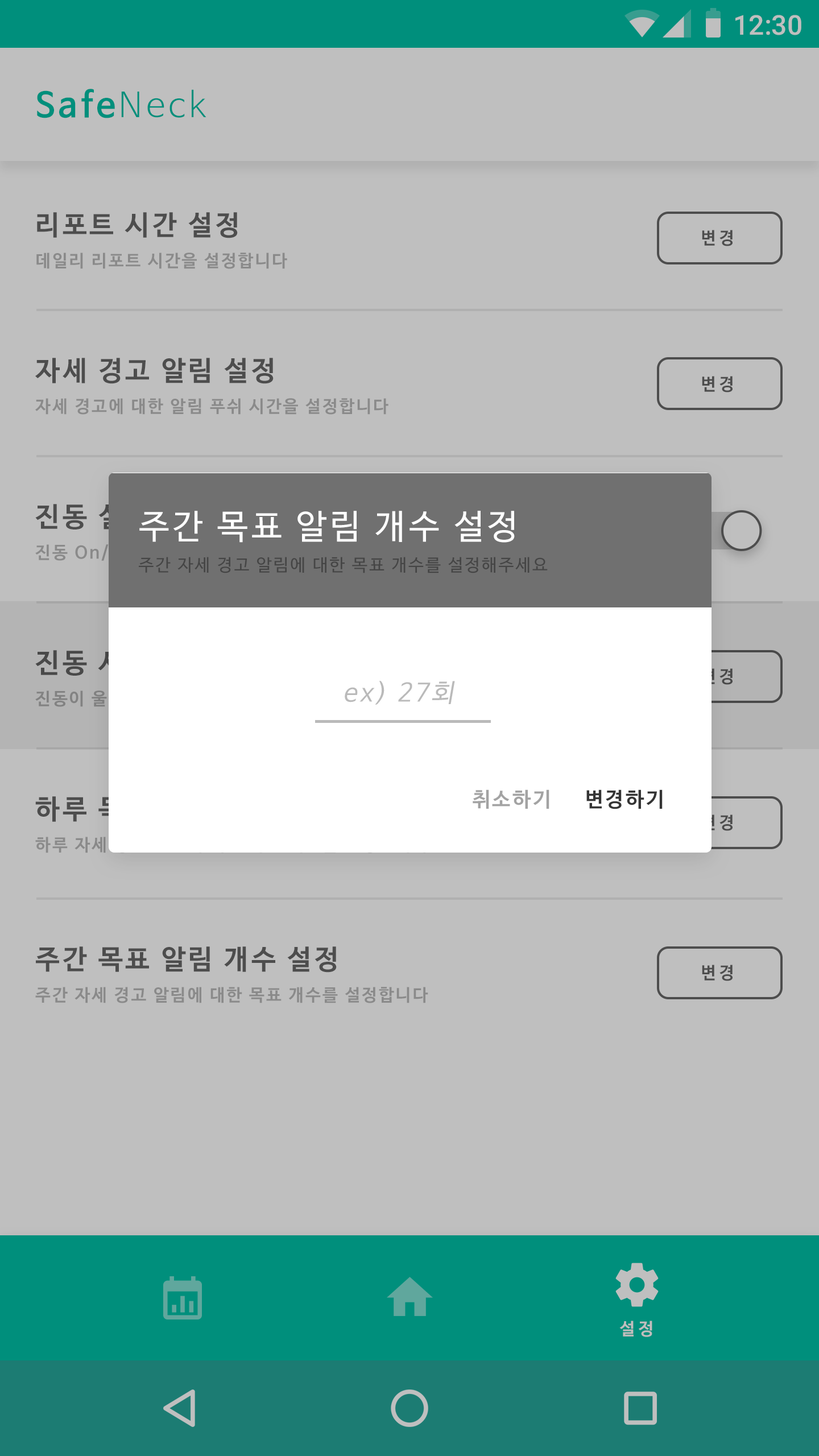
<style>
.page{position:relative;width:819px;height:1456px;background:#bfbfbf}
.page>*{position:absolute;margin:0}
.t1{font:27.3px "Roboto-Medium";color:#bfbfbf}
.t2{font:34.1px "NanumBarunGothicBold";letter-spacing:0.1em;color:#008f7c}
.t3{font:34.1px "NanumBarunGothicLight";letter-spacing:0.1em;color:#008f7c}
.t4{font:27.3px "NanumBarunGothicBold";letter-spacing:0.1em;color:#4d4d4d}
.t5{font:16.9px "NanumBarunGothicBold";letter-spacing:0.2em;color:#4d4d4d}
.t6{font:17.1px "NanumBarunGothicBold";letter-spacing:0.1em;color:#8a8a8a}
.t7{font:27.3px "NanumBarunGothicBold";letter-spacing:0.1em}
.t8{font:34.1px "NanumBarunGothic";letter-spacing:0.1em;color:#fefefe}
.t9{font:17.1px "NanumBarunGothic";letter-spacing:0.1em;color:#454545}
.t10{font:16.9px "NanumBarunGothicBold";letter-spacing:0.2em}
.t11{font:25.2px "NanumBarunGothic";letter-spacing:0.1em;color:#bababa;font-style:italic}
.t12{font:20.5px "NanumBarunGothicBold";letter-spacing:0.1em;color:#a3a3a3}
.t13{font:20.5px "NanumBarunGothicBold";letter-spacing:0.1em;color:#343434}
.t14{font:17px "NanumBarunGothicBold";letter-spacing:0.2em;color:#bfbebe}
</style>
<div class="page">
<p class="t1" style="left:735px;top:15px;width:66px;height:20px">12:30</p>
<p class="t2" style="left:37px;top:89px;width:169px;height:29px">Safe<span class="t3">Neck</span></p>
<p class="t4" style="left:37px;top:212px;width:201px;height:26px">리포트 시간 설정</p>
<p class="t5" style="left:702px;top:230px;width:31px;height:16px">변경</p>
<p class="t6" style="left:36px;top:253px;width:251px;height:16px">데일리 리포트 시간을 설정합니다</p>
<p class="t4" style="left:35px;top:358px;width:239px;height:26px">자세 경고 알림 설정</p>
<p class="t5" style="left:702px;top:376px;width:31px;height:16px">변경</p>
<p class="t6" style="left:35px;top:398px;width:353px;height:17px">자세 경고에 대한 알림 푸쉬 시간을 설정합니다</p>
<p class="t7" style="left:35px;top:504px;width:112px;height:26px">진동 설정</p>
<p class="t8" style="left:139px;top:511px;width:376px;height:32px">주간 목표 알림 개수 설정</p>
<p class="t9" style="left:139px;top:557px;width:409px;height:16px">주간 자세 경고 알림에 대한 목표 개수를 설정해주세요</p>
<p class="t10" style="left:702px;top:668px;width:31px;height:17px">변경</p>
<p class="t11" style="left:345px;top:681px;width:110px;height:24px">ex) 27회</p>
<p class="t12" style="left:473px;top:789px;width:76px;height:20px">취소하기</p>
<p class="t13" style="left:586px;top:789px;width:77px;height:20px">변경하기</p>
<p class="t10" style="left:702px;top:814px;width:31px;height:17px">변경</p>
<p class="t4" style="left:36px;top:946px;width:301px;height:27px">주간 목표 알림 개수 설정</p>
<p class="t5" style="left:702px;top:965px;width:31px;height:16px">변경</p>
<p class="t6" style="left:35px;top:987px;width:393px;height:16px">주간 자세 경고 알림에 대한 목표 개수를 설정합니다</p>
<p class="t14" style="left:619px;top:1321px;width:33px;height:16px">설정</p>
</div>
